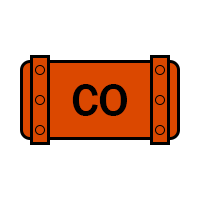
<style>
.page{position:relative;width:200px;height:200px;background:#ffffff}
.page>*{position:absolute;margin:0}
.t1{font:48px "FranklinGothic-Medium";color:#000000}
</style>
<div class="page">
<p class="t1" style="left:72px;top:84px;width:55px;height:32px">CO</p>
</div>
